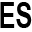
<style>
.page{position:relative;width:32px;height:32px;background:#ffffff}
.page>*{position:absolute;margin:0}
.t1{font:37.1px "ArialNarrow-Bold";color:#000000;scale:0.85 1}
</style>
<div class="page">
<p class="t1" style="left:0px;top:2px;width:32px;height:26px">ES</p>
</div>
